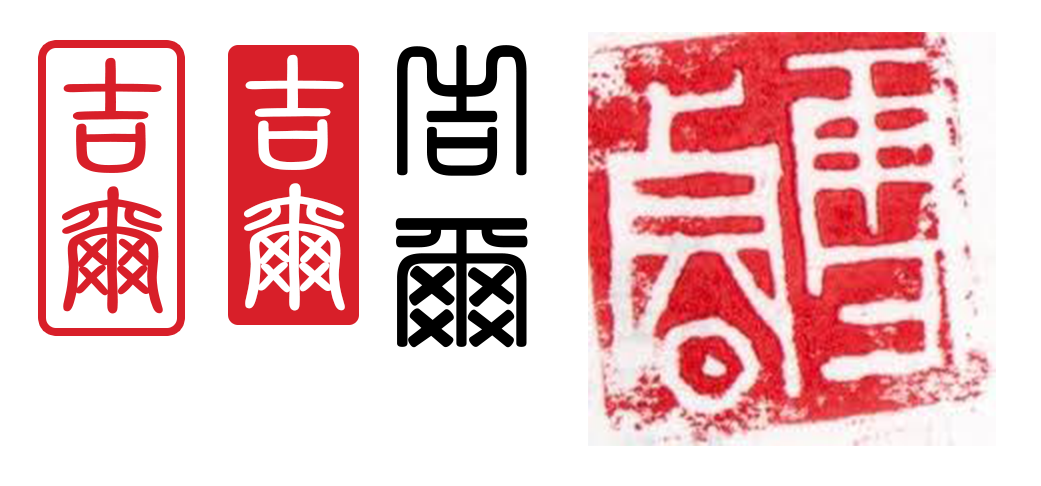
<style>
.page{position:relative;width:1041px;height:486px;background:#ffffff}
.page>*{position:absolute;margin:0}
.t1{font:133.1px/132.6px "HYj1gf";color:#ffffff;font-weight:bold;scale:1.45 1}
.t2{font:144px "¾­µä·±·½×­ Regular";color:#000000}
.t3{font:133.1px/132.6px "HYj1gf";color:#d81f29;font-weight:bold;scale:1.45 1}
</style>
<div class="page">
<p class="t1" style="left:243px;top:54px;width:102px;height:257px">吉<br>尔</p>
<p class="t2" style="left:395px;top:45px;width:133px;height:303px">吉<br>尔</p>
<p class="t3" style="left:61px;top:57px;width:102px;height:257px">吉<br>尔</p>
</div>
